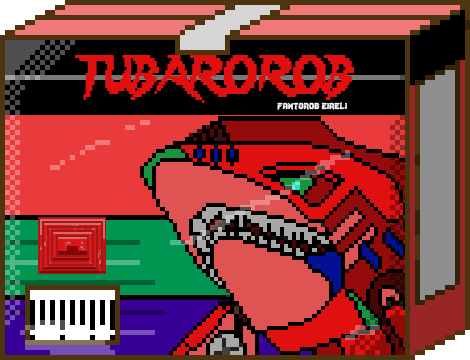
<style>
.page{position:relative;width:470px;height:360px;background:#000000}
.page>*{position:absolute;margin:0}
.t1{font:48px "Lady-Radical";color:#e01010;scale:0.72 1}
.t2{font:12px "Lady-Radical";color:#fbfbfb}
</style>
<div class="page">
<p class="t1" style="left:75px;top:55px;width:279px;height:48px">TUBAROROB</p>
<p class="t2" style="left:277px;top:102px;width:70px;height:8px">fantorob eireli</p>
</div>
